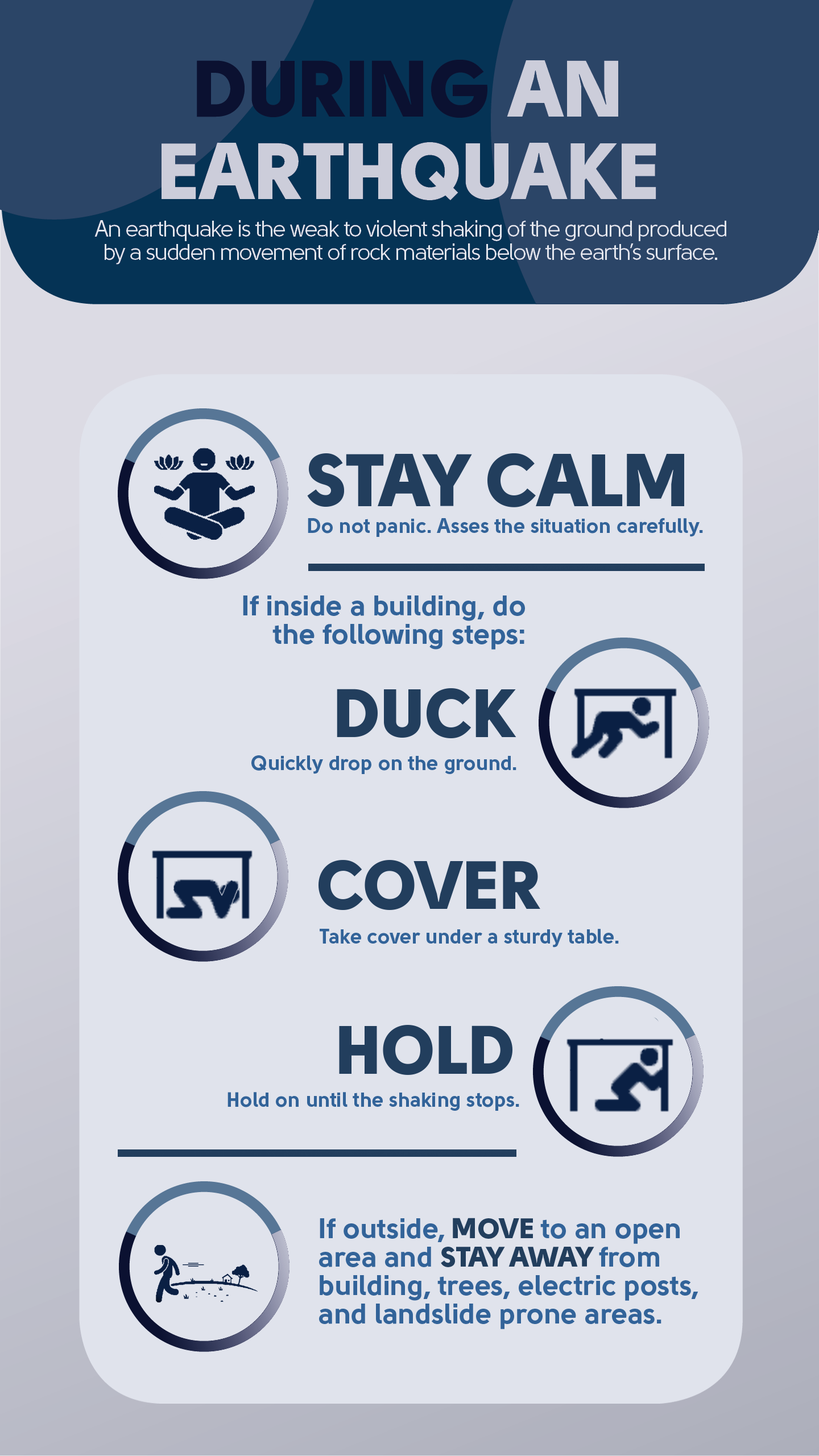
<style>
.page{position:relative;width:819px;height:1456px;background:#e0e3ec}
.page>*{position:absolute;margin:0}
.t1{font:73.9px "Solomon-Sans-Black";color:#223e5d}
.t2{font:20.5px "Solomon-Sans-Bold";color:#326399}
.t3{font:28.4px/28.4px "Solomon-Sans-Bold";color:#326399}
.t4{font:68.2px "Solomon-Sans-Black";color:#223e5d}
.t5{font:28.4px/28.4px "Solomon-Sans-Black";color:#223e5d}
</style>
<div class="page">
<p class="t1" style="left:307px;top:453px;width:377px;height:54px">STAY CALM</p>
<p class="t2" style="left:308px;top:518px;width:395px;height:19px">Do not panic. Asses the situation carefully.</p>
<p class="t3" style="left:243px;top:595px;width:282px;height:55px;text-align:right">If inside a building, do<br>the following steps:</p>
<p class="t4" style="left:337px;top:688px;width:179px;height:50px">DUCK</p>
<p class="t2" style="left:251px;top:755px;width:265px;height:19px">Quickly drop on the ground.</p>
<p class="t4" style="left:318px;top:860px;width:222px;height:50px">COVER</p>
<p class="t2" style="left:320px;top:929px;width:299px;height:19px">Take cover under a sturdy table.</p>
<p class="t4" style="left:339px;top:1025px;width:173px;height:50px">HOLD</p>
<p class="t2" style="left:227px;top:1092px;width:292px;height:19px">Hold on until the shaking stops.</p>
<p class="t3" style="left:319px;top:1218px;width:379px;height:111px">If outside,<span class="t5"> MOVE</span> to an open<br>area and <span class="t5">STAY AWAY </span>from<br>building, trees, electric posts,<br>and landslide prone areas.</p>
</div>
